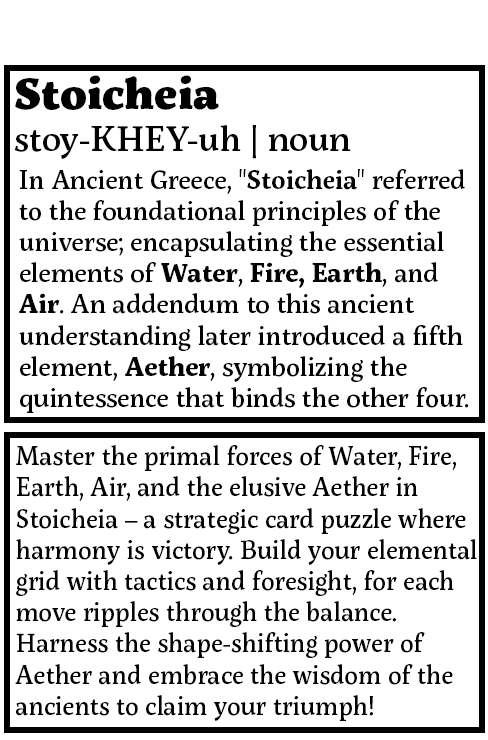
<style>
.page{position:relative;width:488px;height:740px;background:#ffffff}
.page>*{position:absolute;margin:0}
.t1{font:35px "ServusSlab-Medium";color:#020202}
.t2{font:43px "ServusSlab-Black";color:#020202}
.t3{font:26px "ServusSlab-Medium";color:#020202}
.t4{font:26px "ServusSlab-SemiBold";color:#020202}
.t5{font:26px "ServusSlab-Bold";color:#020202}
.t6{font:26px "ServusSlab-ExtraBold";color:#020202}
.t7{font:26px "ServusSlab-Medium";color:#020202;scale:0.97 1}
</style>
<div class="page">
<p class="t1" style="left:14px;top:75px;width:337px;height:84px"><span class="t2">Stoicheia<br></span>stoy-KHEY-uh | noun</p>
<p class="t3" style="left:19px;top:169px;width:450px;height:244px">In Ancient Greece, "<span class="t4">Stoicheia</span>" referred to the foundational principles of the universe; encapsulating the essential elements of <span class="t5">Water</span>, <span class="t5">Fire</span><span class="t6">, </span><span class="t5">Earth</span>, and <span class="t5">Air</span>. An addendum to this ancient understanding later introduced a fifth element, <span class="t5">Aether</span>, symbolizing the quintessence that binds the other four.</p>
<p class="t7" style="left:15px;top:445px;width:462px;height:276px">Master the primal forces of Water, Fire, Earth, Air, and the elusive Aether in Stoicheia – a strategic card puzzle where harmony is victory. Build your elemental grid with tactics and foresight, for each move ripples through the balance. Harness the shape-shifting power of Aether and embrace the wisdom of the ancients to claim your triumph!</p>
</div>
